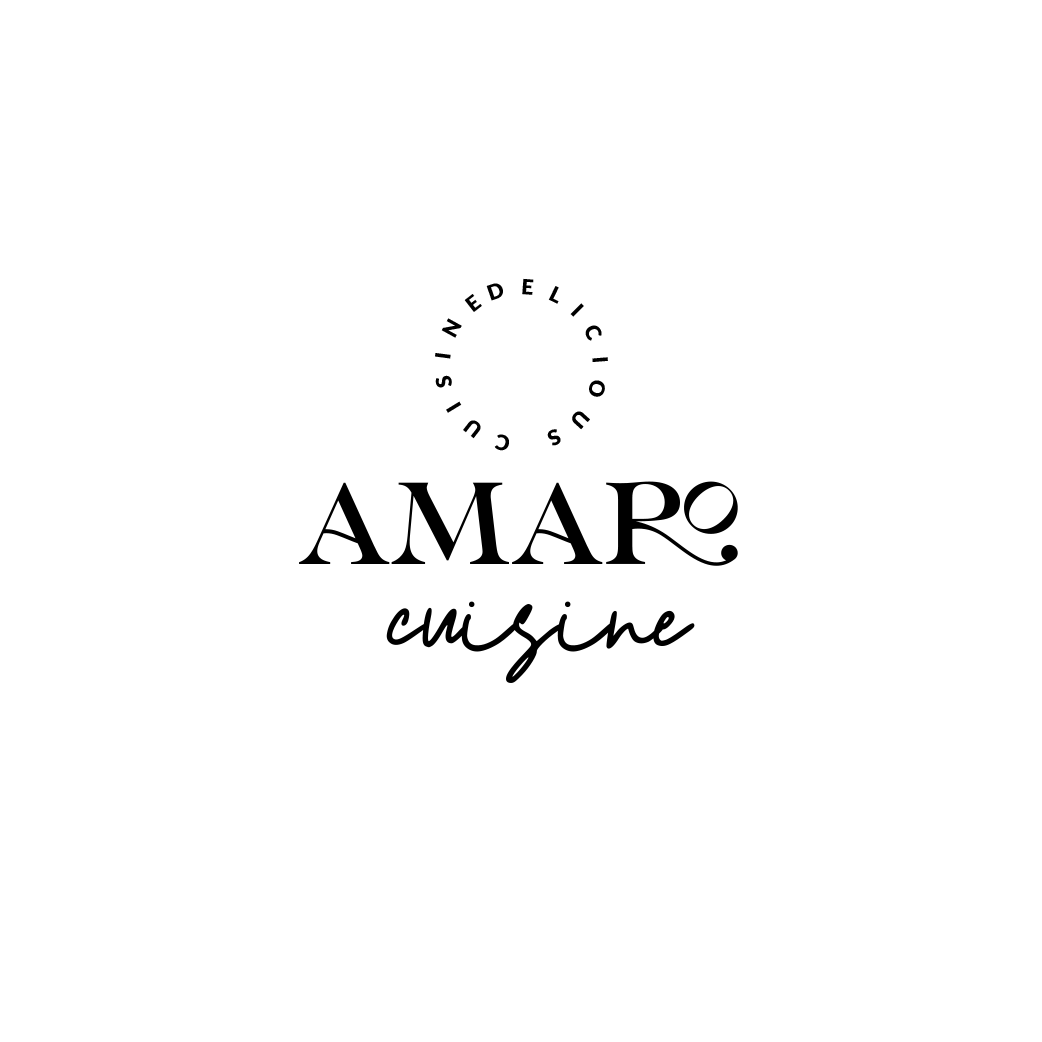
<style>
.page{position:relative;width:1042px;height:1042px;background:#ffffff}
.page>*{position:absolute;margin:0}
.t1{font:20.8px "Lato-Black";letter-spacing:0.7em;color:#000000;text-transform:uppercase}
.t2{font:116.4px "LorettoRegular";color:#000000;text-transform:uppercase}
.t3{font:138.3px "BestermindRegular";color:#000000}
</style>
<div class="page">
<p class="t1" style="left:435px;top:278px;width:173px;height:173px">DELICIOUS CUISINE</p>
<p class="t2" style="left:299px;top:481px;width:439px;height:85px">amaro</p>
<p class="t3" style="left:386px;top:601px;width:309px;height:82px">cuisine</p>
</div>
